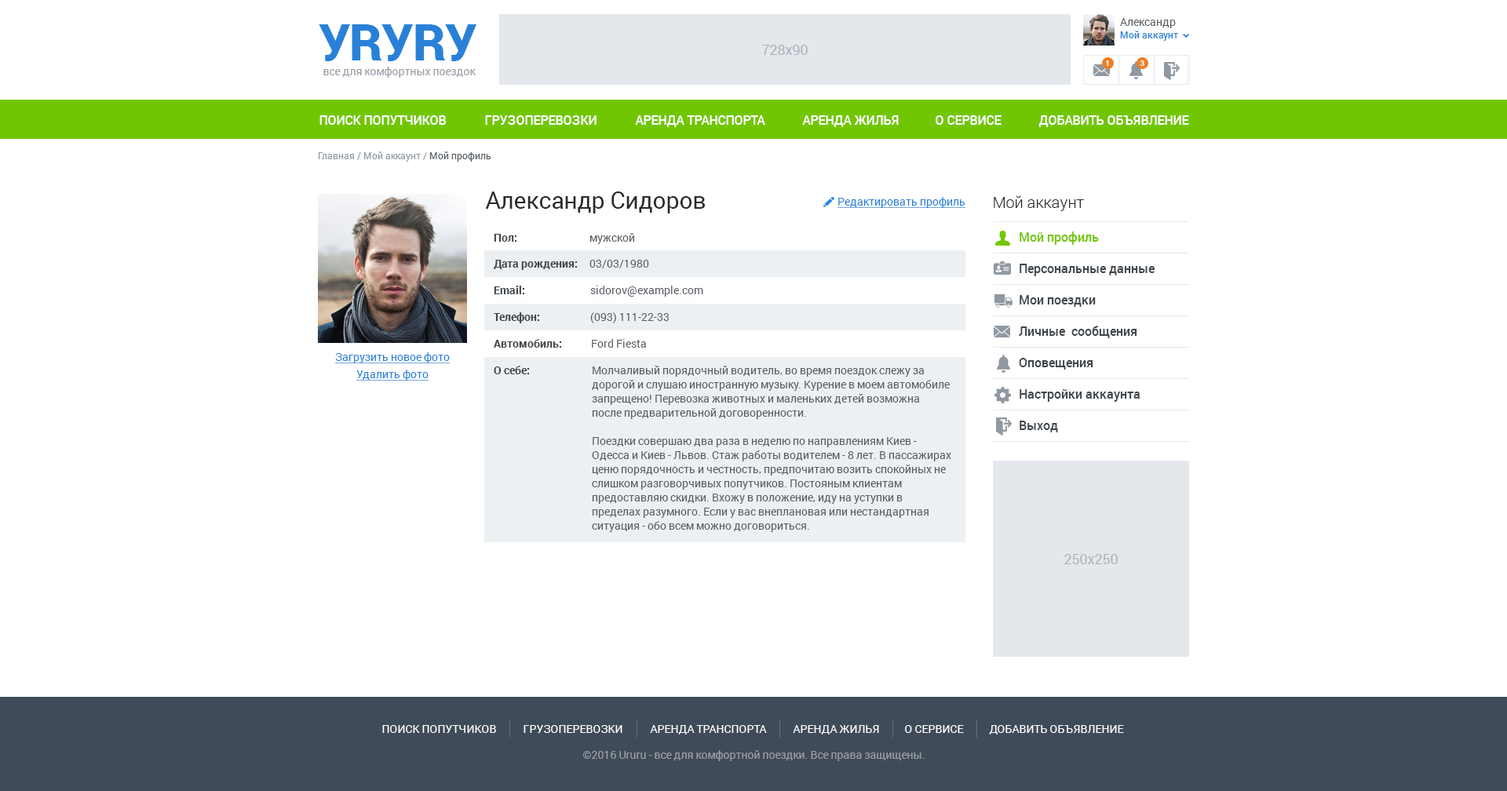
<style>
.page{position:relative;width:1507px;height:791px;background:#ffffff}
.page>*{position:absolute;margin:0}
.t1{font:50.2px "Roboto-Black";letter-spacing:-0.01em;color:#2981d7}
.t2{font:11px "Roboto-Regular";color:#585e64}
.t3{font:9.4px "Roboto-Medium";color:#2981d7}
.t4{font:14.1px "Roboto-Regular";color:#acb2b8}
.t5{font:7.8px "Roboto-Medium";color:#ffffff}
.t6{font:11px "Roboto-Regular";color:#949ca5}
.t7{font:12.6px "Roboto-Medium";color:#ffffff;text-transform:uppercase}
.t8{font:9.4px "Roboto-Regular";color:#949ca5}
.t9{font:9.4px "Roboto-Regular";color:#585e64}
.t10{font:23.5px "Roboto-Regular";color:#2a2a2a}
.t11{font:11px "Roboto-Regular";color:#2981d7;text-decoration:underline}
.t12{font:15.7px "Roboto-Light";color:#2a2a2a}
.t13{font:11px "Roboto-Bold";color:#3f454b}
.t14{font:12.6px "Roboto-Medium";color:#72c601}
.t15{font:12.6px "Roboto-Medium";color:#3f454b}
.t16{font:11px/14.1px "Roboto-Regular";color:#585e64}
.t17{font:11px "Roboto-Regular";color:#ffffff;text-transform:uppercase}
.t18{font:11px "Roboto-Regular";color:#9ca0a6}
</style>
<div class="page">
<p class="t1" style="left:319px;top:24px;width:157px;height:37px">УRУRУ</p>
<p class="t2" style="left:1120px;top:18px;width:56px;height:10px">Александр</p>
<p class="t3" style="left:1120px;top:31px;width:58px;height:10px">Мой аккаунт</p>
<p class="t4" style="left:762px;top:45px;width:46px;height:10px">728x90</p>
<p class="t5" style="left:1106px;top:60px;width:3px;height:6px">1</p>
<p class="t5" style="left:1140px;top:60px;width:4px;height:6px">3</p>
<p class="t6" style="left:323px;top:67px;width:153px;height:11px">все для комфортных поездок</p>
<p class="t7" style="left:319px;top:115px;width:128px;height:10px">Поиск попутчиков</p>
<p class="t7" style="left:485px;top:115px;width:112px;height:10px">грузоперевозки</p>
<p class="t7" style="left:635px;top:115px;width:130px;height:12px">Аренда транспорта</p>
<p class="t7" style="left:802px;top:115px;width:97px;height:12px">Аренда жилья</p>
<p class="t7" style="left:936px;top:115px;width:66px;height:10px">о сервисе</p>
<p class="t7" style="left:1038px;top:115px;width:151px;height:12px">добавить объявление</p>
<p class="t8" style="left:318px;top:151px;width:173px;height:11px">Главная / Мой аккаунт / <span class="t9">Мой профиль</span></p>
<p class="t10" style="left:485px;top:192px;width:220px;height:22px">Александр Сидоров</p>
<p class="t11" style="left:838px;top:197px;width:127px;height:11px">Редактировать профиль</p>
<p class="t12" style="left:994px;top:195px;width:90px;height:16px">Мой аккаунт</p>
<p class="t13" style="left:494px;top:234px;width:23px;height:8px">Пол:</p>
<p class="t2" style="left:589px;top:233px;width:46px;height:11px">мужской</p>
<p class="t14" style="left:1020px;top:232px;width:79px;height:13px">Мой профиль</p>
<p class="t13" style="left:494px;top:260px;width:84px;height:10px">Дата рождения:</p>
<p class="t2" style="left:589px;top:260px;width:60px;height:8px">03/03/1980</p>
<p class="t15" style="left:1020px;top:264px;width:135px;height:12px">Персональные данные</p>
<p class="t13" style="left:494px;top:286px;width:31px;height:8px">Email:</p>
<p class="t2" style="left:590px;top:286px;width:113px;height:11px">sidorov@example.com</p>
<p class="t15" style="left:1020px;top:295px;width:76px;height:12px">Мои поездки</p>
<p class="t13" style="left:494px;top:312px;width:46px;height:11px">Телефон:</p>
<p class="t2" style="left:590px;top:312px;width:79px;height:11px">(093) 111-22-33</p>
<p class="t15" style="left:1019px;top:326px;width:118px;height:12px">Личные  сообщения</p>
<p class="t13" style="left:494px;top:339px;width:68px;height:9px">Автомобиль:</p>
<p class="t2" style="left:592px;top:339px;width:54px;height:9px">Ford Fiesta</p>
<p class="t11" style="left:335px;top:352px;width:115px;height:11px">Загрузить новое фото</p>
<p class="t13" style="left:494px;top:366px;width:36px;height:8px">О себе:</p>
<p class="t16" style="left:592px;top:366px;width:359px;height:166px">Молчаливый порядочный водитель, во время поездок слежу за дорогой и слушаю иностранную музыку. Курение в моем автомобиле запрещено! Перевозка животных и маленьких детей возможна после предварительной договоренности. <br><br>Поездки совершаю два раза в неделю по направлениям Киев - Одесса и Киев - Львов. Стаж работы водителем - 8 лет. В пассажирах ценю порядочность и честность, предпочитаю возить спокойных не слишком разговорчивых попутчиков. Постояным клиентам предоставляю скидки. Вхожу в положение, иду на уступки в пределах разумного. Если у вас внеплановая или нестандартная ситуация - обо всем можно договориться.</p>
<p class="t15" style="left:1019px;top:358px;width:74px;height:12px">Оповещения</p>
<p class="t11" style="left:356px;top:370px;width:73px;height:11px">Удалить фото</p>
<p class="t15" style="left:1020px;top:389px;width:120px;height:13px">Настройки аккаунта</p>
<p class="t15" style="left:1020px;top:421px;width:38px;height:12px">Выход</p>
<p class="t4" style="left:1064px;top:554px;width:54px;height:10px">250х250</p>
<p class="t17" style="left:382px;top:725px;width:114px;height:8px">Поиск попутчиков</p>
<p class="t17" style="left:524px;top:725px;width:98px;height:8px">грузоперевозки</p>
<p class="t17" style="left:650px;top:725px;width:117px;height:10px">Аренда транспорта</p>
<p class="t17" style="left:793px;top:725px;width:86px;height:10px">Аренда жилья</p>
<p class="t17" style="left:905px;top:725px;width:59px;height:8px">о сервисе</p>
<p class="t17" style="left:989px;top:725px;width:135px;height:10px">добавить объявление</p>
<p class="t18" style="left:583px;top:750px;width:342px;height:11px">©2016 Ururu - все для комфортной поездки. Все права защищены.</p>
</div>
